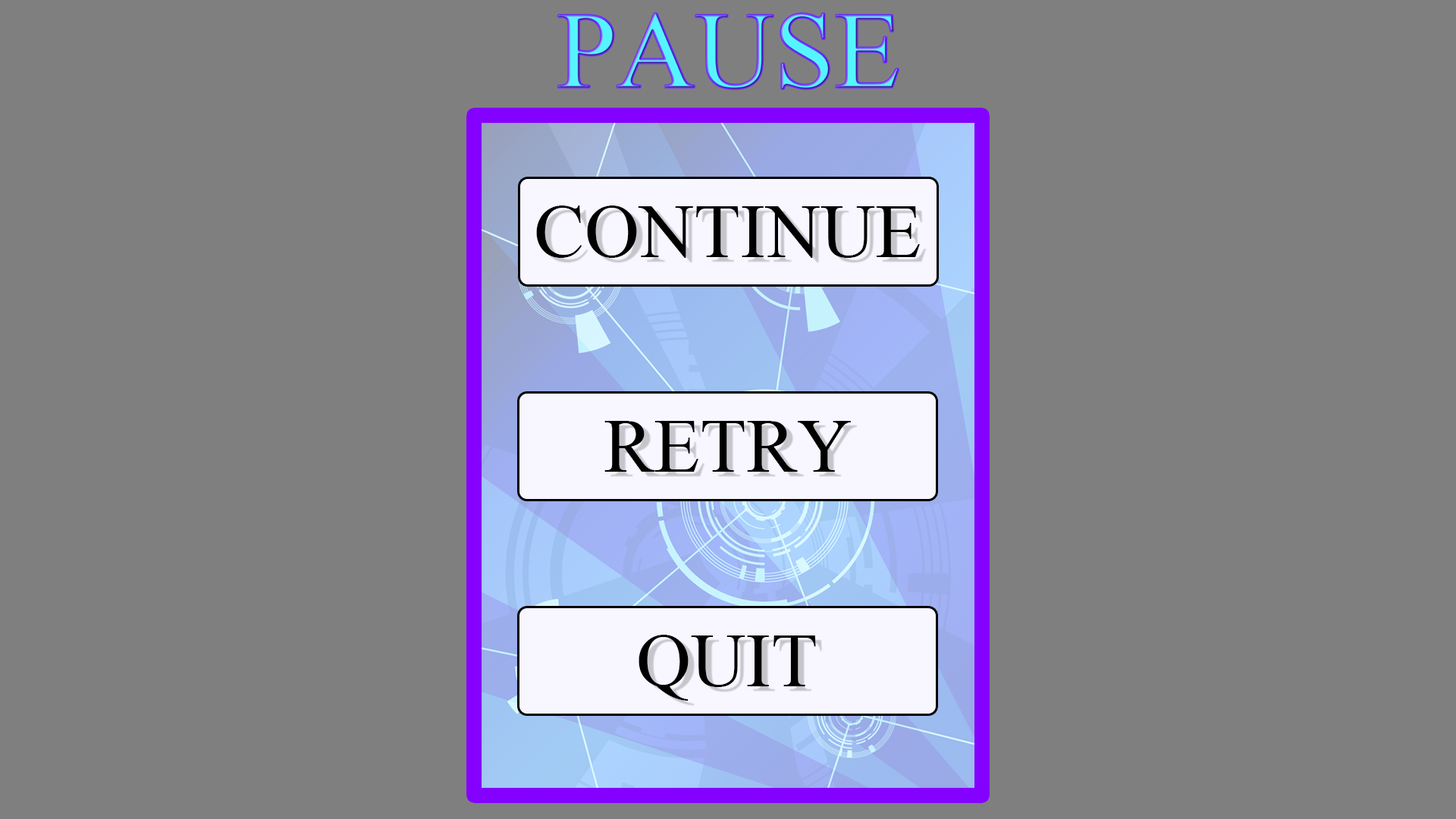
<style>
.page{position:relative;width:1456px;height:819px;background:#7f7f7f}
.page>*{position:absolute;margin:0}
.t1{font:108.8px "TimesNewRomanPSMT";color:#55f5ff}
.t2{font:75.8px "TimesNewRomanPSMT";color:#000000}
</style>
<div class="page">
<p class="t1" style="left:558px;top:14px;width:341px;height:75px">PAUSE</p>
<p class="t2" style="left:536px;top:206px;width:384px;height:52px">CONTINUE</p>
<p class="t2" style="left:604px;top:421px;width:247px;height:51px">RETRY</p>
<p class="t2" style="left:639px;top:635px;width:177px;height:66px">QUIT</p>
</div>
